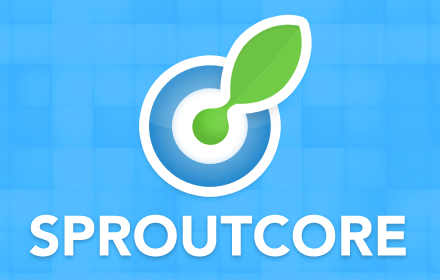
<style>
.page{position:relative;width:440px;height:280px}
.page>*{position:absolute;margin:0}
.t1{font:56px "Avenir-Black";color:#ffffff}
</style>
<div class="page">
<p class="t1" style="left:29px;top:214px;width:377px;height:43px">SPROUTCORE</p>
</div>
